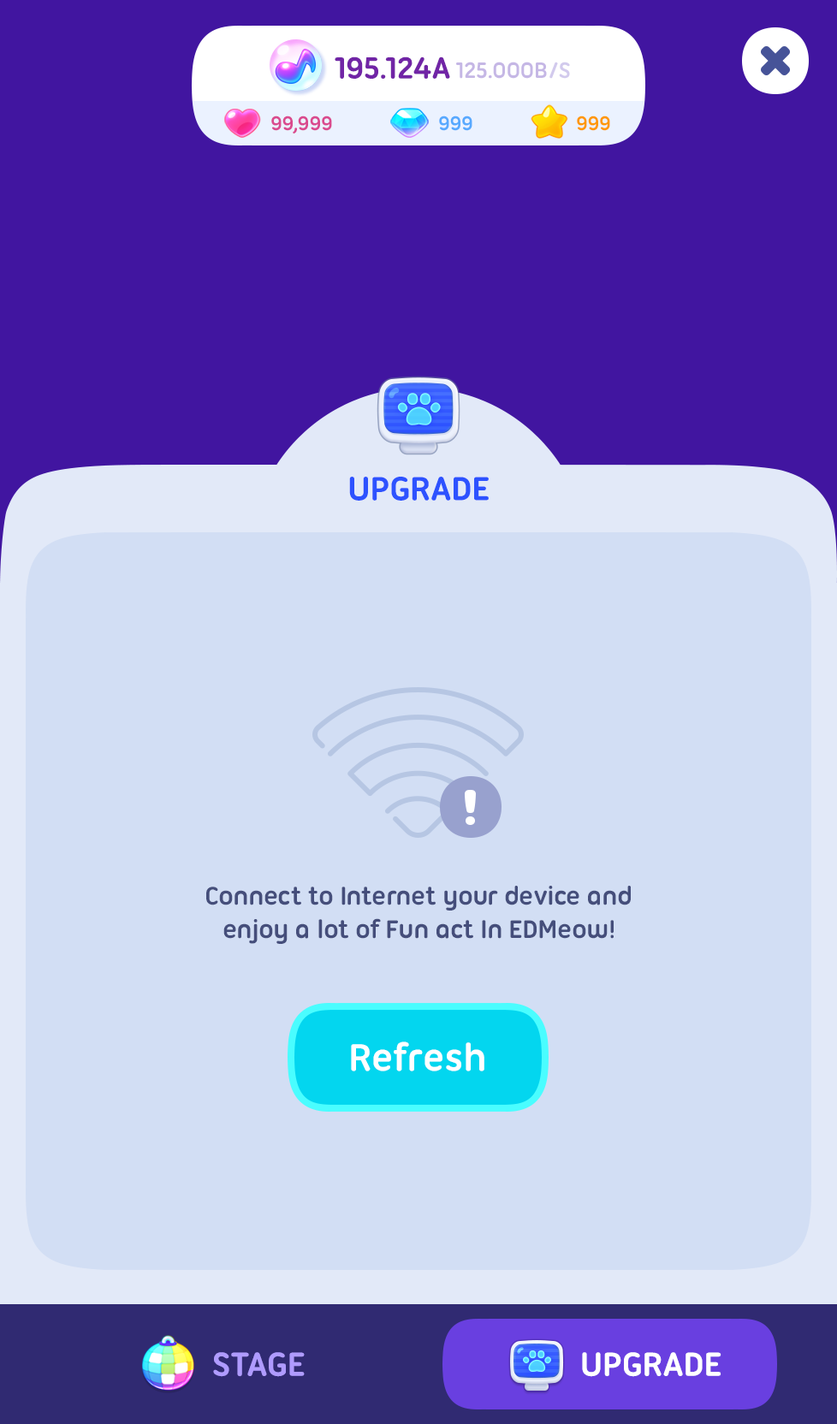
<style>
.page{position:relative;width:837px;height:1424px;background:#d2def4}
.page>*{position:absolute;margin:0}
.t1{font:36px "UbuntuTitling-Bold";letter-spacing:-0.025em;color:#2d52ff;text-transform:uppercase}
.t2{font:27.4px "UbuntuTitling-Bold";letter-spacing:-0.025em;color:#454e7b}
.t3{font:41.1px "UbuntuTitling-Bold";letter-spacing:-0.01em;color:#ffffff}
.t4{font:36px "UbuntuTitling-Bold";letter-spacing:-0.025em;color:#af9bff;text-transform:uppercase}
.t5{font:36px "UbuntuTitling-Bold";letter-spacing:-0.025em;color:#ffffff;text-transform:uppercase}
</style>
<div class="page">
<p class="t1" style="left:349px;top:477px;width:140px;height:24px">Upgrade</p>
<p class="t2" style="left:206px;top:886px;width:425px;height:58px;text-align:center">Connect to Internet your device and<br>enjoy a lot of Fun act In EDMeow!</p>
<p class="t3" style="left:351px;top:1042px;width:133px;height:30px">Refresh</p>
<p class="t4" style="left:213px;top:1352px;width:92px;height:25px">Stage</p>
<p class="t5" style="left:582px;top:1352px;width:140px;height:25px">Upgrade</p>
</div>
